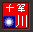
<style>
.page{position:relative;width:33px;height:32px;background:#f20000}
.page>*{position:absolute;margin:0}
.t1{font:10.4px "SimSun";color:#ffffff}
.t2{font:11.7px "SimSun";color:#ffffff}
</style>
<div class="page">
<p class="t1" style="left:6px;top:4px;width:19px;height:8px">十军</p>
<p class="t2" style="left:16px;top:15px;width:11px;height:12px">川</p>
</div>
